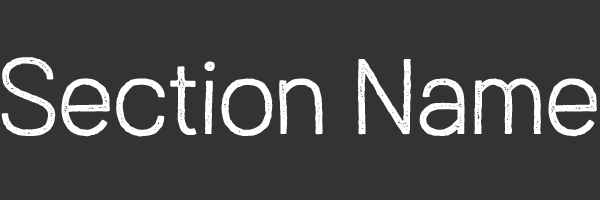
<style>
.page{position:relative;width:600px;height:200px;background:#333333}
.page>*{position:absolute;margin:0}
.t1{font:100px "AustralSansStamp-Light";color:#ffffff}
</style>
<div class="page">
<p class="t1" style="left:1px;top:57px;width:596px;height:80px">Section Name</p>
</div>
